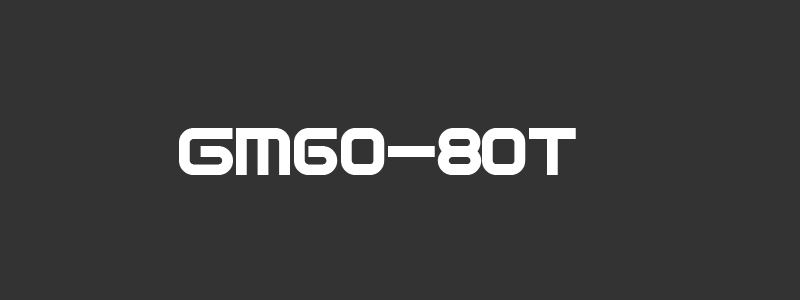
<style>
.page{position:relative;width:800px;height:300px;background:#333333}
.page>*{position:absolute;margin:0}
.t1{font:72px "TerminatorTwo";color:#ffffff}
</style>
<div class="page">
<p class="t1" style="left:179px;top:128px;width:397px;height:47px">GM60-80T</p>
</div>
